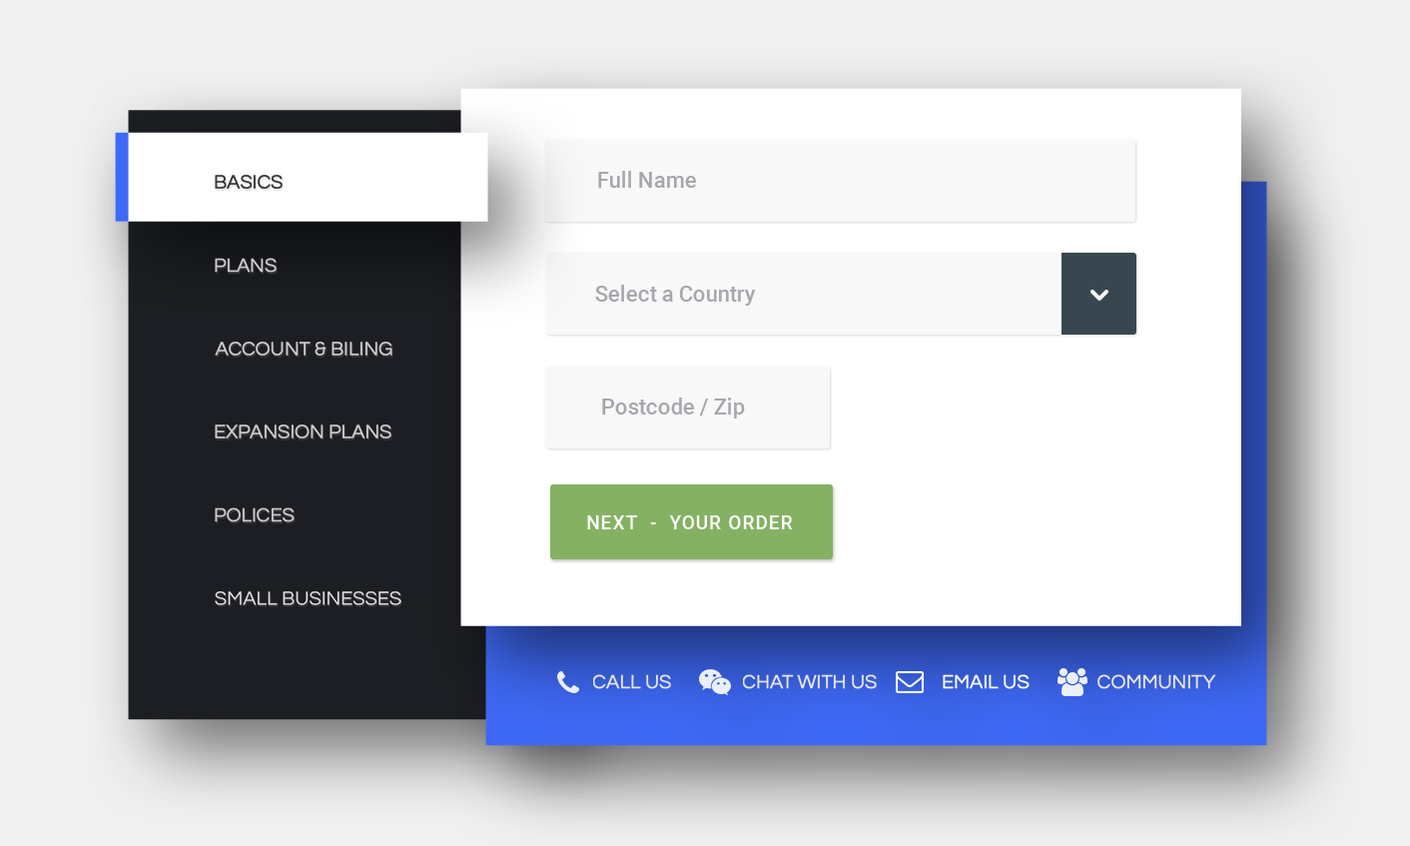
<style>
.page{position:relative;width:1410px;height:846px;background:#ffffff}
.page>*{position:absolute;margin:0}
.t1{font:22px "Roboto-Medium";color:#a6a6ad}
.t2{font:20px "Questrial-Regular";color:#333333;text-transform:uppercase}
.t3{font:20px "Questrial-Regular";color:#cccccc;text-transform:uppercase}
.t4{font:19px "Roboto-Medium";letter-spacing:0.06em;color:#ffffff;text-transform:uppercase}
.t5{font:20px "Questrial-Regular";color:#e6e6e6;text-transform:uppercase}
.t6{font:20px "Questrial-Regular";color:#ffffff;text-transform:uppercase}
</style>
<div class="page">
<p class="t1" style="left:598px;top:171px;width:98px;height:17px">Full Name</p>
<p class="t2" style="left:215px;top:175px;width:68px;height:14px">Basics</p>
<p class="t3" style="left:215px;top:258px;width:62px;height:15px">Plans</p>
<p class="t1" style="left:595px;top:285px;width:161px;height:21px">Select a Country</p>
<p class="t3" style="left:215px;top:341px;width:177px;height:14px">account &amp; biling</p>
<p class="t1" style="left:602px;top:397px;width:143px;height:21px">Postcode / Zip</p>
<p class="t3" style="left:215px;top:424px;width:176px;height:14px">Expansion plans</p>
<p class="t3" style="left:215px;top:507px;width:80px;height:15px">polices</p>
<p class="t4" style="left:587px;top:515px;width:206px;height:14px">Next  -  your order</p>
<p class="t5" style="left:215px;top:591px;width:186px;height:14px">small businesses</p>
<p class="t5" style="left:593px;top:674px;width:78px;height:15px">Call us</p>
<p class="t5" style="left:743px;top:674px;width:134px;height:15px">CHAT WITH us</p>
<p class="t6" style="left:943px;top:674px;width:86px;height:15px">Email us</p>
<p class="t5" style="left:1097px;top:674px;width:119px;height:15px">Community</p>
</div>
